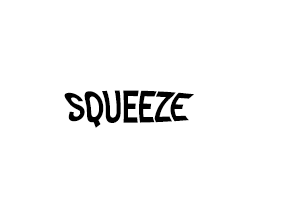
<style>
.page{position:relative;width:300px;height:200px;background:#ffffff}
.page>*{position:absolute;margin:0}
.t1{font:36px "Roboto-Bold";color:#000000}
</style>
<div class="page">
<p class="t1" style="left:64px;top:90px;width:130px;height:38px">SQUEEZE</p>
</div>
